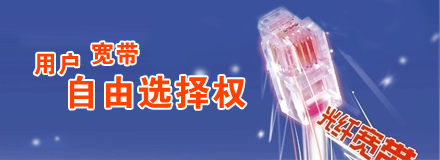
<style>
.page{position:relative;width:440px;height:160px}
.page>*{position:absolute;margin:0}
.t1{font:24px "FZDHTJW--GB1-0";letter-spacing:0.025em;color:#ff4200}
.t2{font:36px "FZDHTJW--GB1-0";letter-spacing:0.025em;color:#ff4200}
</style>
<div class="page">
<p class="t1" style="left:34px;top:52px;width:45px;height:23px">用户</p>
<p class="t1" style="left:92px;top:42px;width:46px;height:23px">宽带</p>
<p class="t2" style="left:70px;top:75px;width:176px;height:34px">自由选择权</p>
</div>
